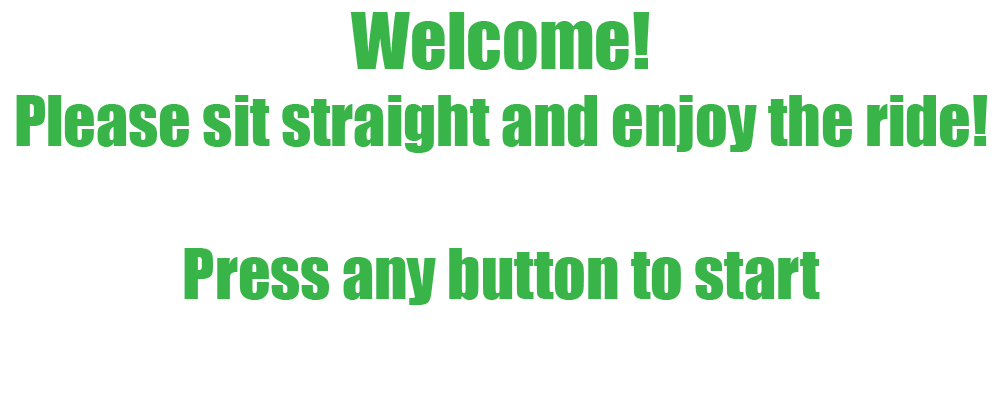
<style>
.page{position:relative;width:1000px;height:400px;background:#ffffff}
.page>*{position:absolute;margin:0}
.t1{font:64px "Impact";color:#39b54a}
.t2{font:72px "Impact";color:#39b54a}
</style>
<div class="page">
<p class="t1" style="left:16px;top:12px;width:972px;height:293px;text-align:center"><span class="t2">Welcome!<br></span>Please sit straight and enjoy the ride!<br><br>Press any button to start</p>
</div>
